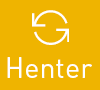
<style>
.page{position:relative;width:100px;height:90px;background:#efb400}
.page>*{position:absolute;margin:0}
.t1{font:28.6px "DIN-Regular";color:#ffffff}
</style>
<div class="page">
<p class="t1" style="left:7px;top:57px;width:85px;height:21px">Henter</p>
</div>
